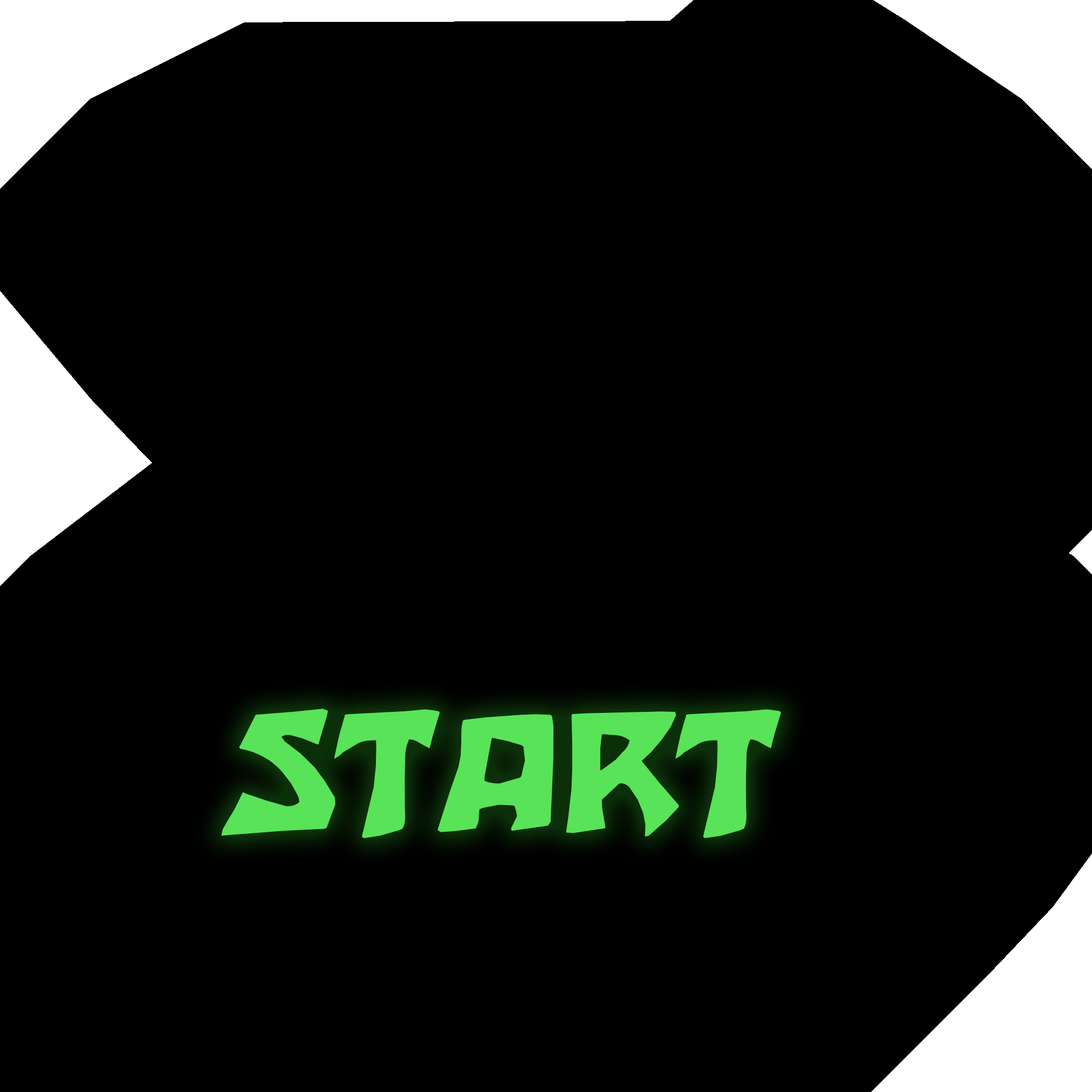
<style>
.page{position:relative;width:1092px;height:1092px;background:#000000}
.page>*{position:absolute;margin:0}
.t1{font:160px "Tarzan";color:#59e359}
</style>
<div class="page">
<p class="t1" style="left:221px;top:709px;width:560px;height:129px">START</p>
</div>
